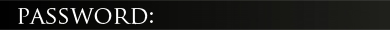
<style>
.page{position:relative;width:390px;height:30px}
.page>*{position:absolute;margin:0}
.t1{font:24px "TrajanPro-Regular";color:#ffffff}
</style>
<div class="page">
<p class="t1" style="left:18px;top:8px;width:135px;height:17px">password:</p>
</div>
